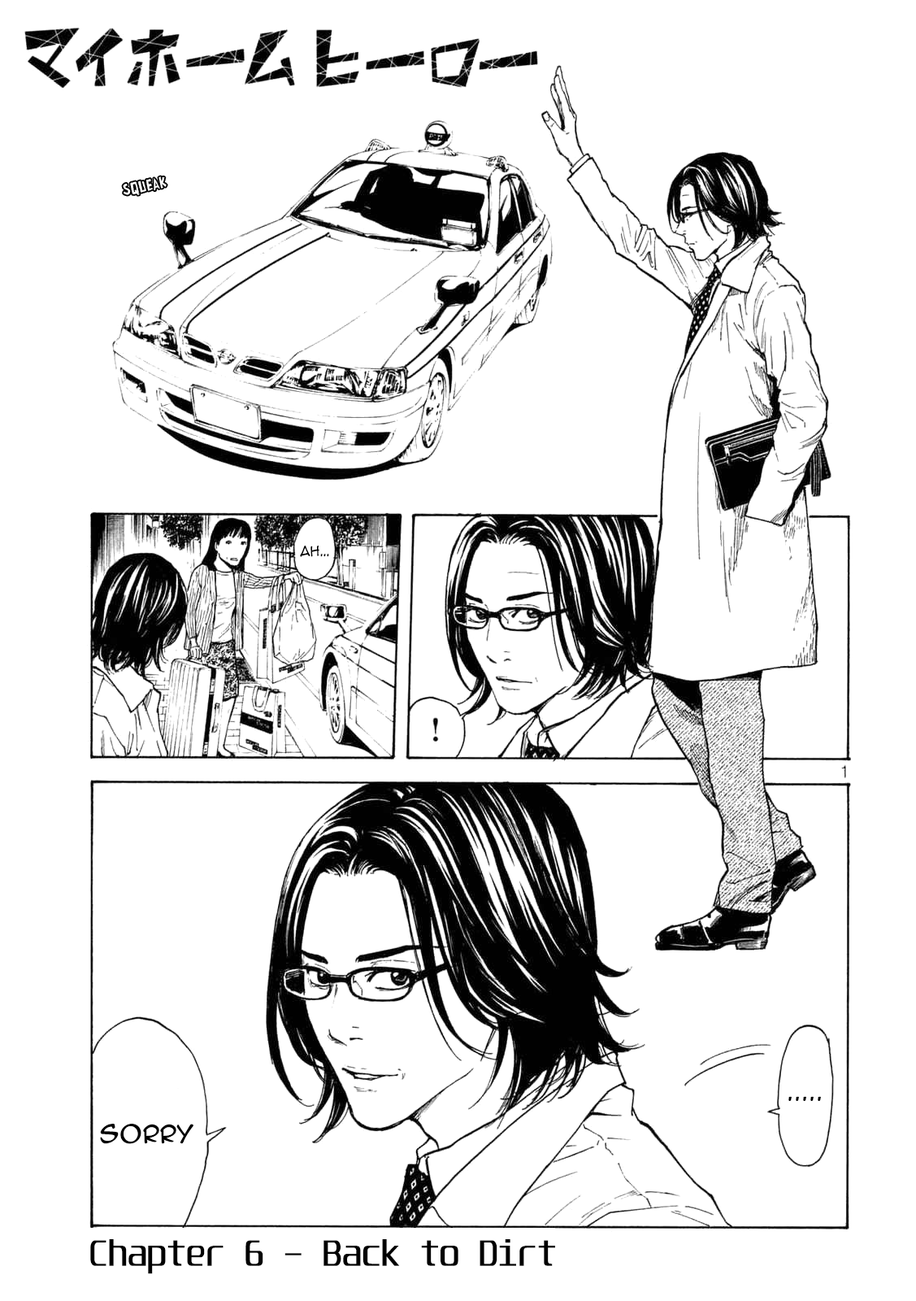
<style>
.page{position:relative;width:916px;height:1301px;background:#ffffff}
.page>*{position:absolute;margin:0}
.t1{font:16.3px "allexesmustdie!";color:#ffffff}
.t2{font:13px "AnimeAce2.0BB";color:#000000}
.t3{font:22.8px "AnimeAce2.0BB";color:#000000}
.t4{font:31.4px "Unispace-Regular";color:#000000}
</style>
<div class="page">
<p class="t1" style="left:123px;top:176px;width:44px;height:19px;rotate:-11deg">squeak</p>
<p class="t2" style="left:300px;top:546px;width:29px;height:11px">Ah…</p>
<p class="t3" style="left:789px;top:1096px;width:32px;height:5px">.....</p>
<p class="t3" style="left:100px;top:1124px;width:94px;height:20px">Sorry</p>
<p class="t4" style="left:90px;top:1239px;width:465px;height:35px">Chapter 6 - Back to Dirt</p>
</div>
